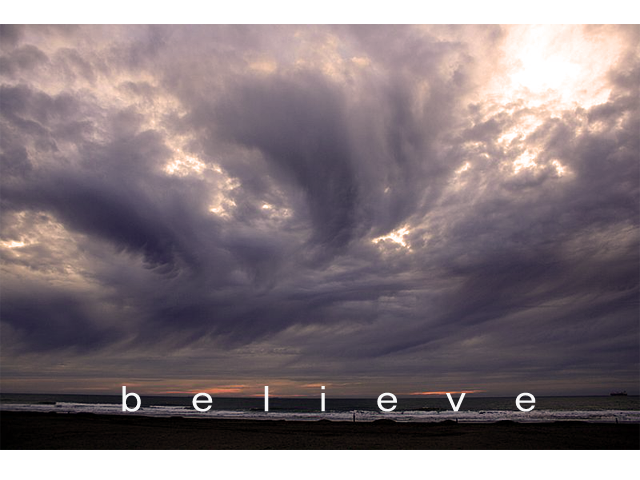
<style>
.page{position:relative;width:640px;height:480px}
.page>*{position:absolute;margin:0}
.t1{font:36px "OriyaSangamMN";letter-spacing:1.1em;color:#f7f7f7;scale:1.2 1}
</style>
<div class="page">
<p class="t1" style="left:122px;top:386px;width:414px;height:26px">believe</p>
</div>
